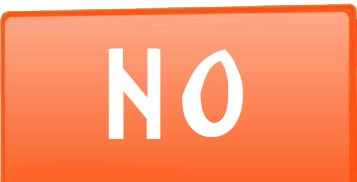
<style>
.page{position:relative;width:357px;height:182px}
.page>*{position:absolute;margin:0}
.t1{font:122px "Earthworm-Jim";letter-spacing:0.1em;color:#ffffff;scale:0.75 1}
</style>
<div class="page">
<p class="t1" style="left:108px;top:48px;width:135px;height:91px">No</p>
</div>
